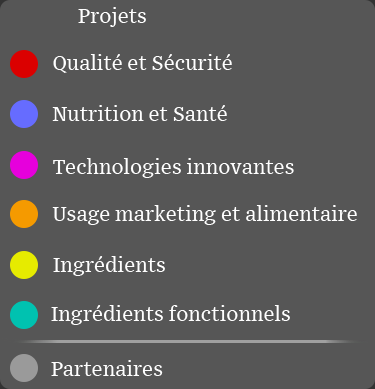
<style>
.page{position:relative;width:375px;height:389px;background:#565656}
.page>*{position:absolute;margin:0}
.t1{font:20px "Font";color:#ffffff}
</style>
<div class="page">
<p class="t1" style="left:78px;top:7px;width:68px;height:20px">Projets</p>
<p class="t1" style="left:53px;top:54px;width:179px;height:19px">Qualité et Sécurité</p>
<p class="t1" style="left:52px;top:105px;width:175px;height:16px">Nutrition et Santé</p>
<p class="t1" style="left:53px;top:158px;width:241px;height:20px">Technologies innovantes</p>
<p class="t1" style="left:52px;top:205px;width:305px;height:20px">Usage marketing et alimentaire</p>
<p class="t1" style="left:53px;top:256px;width:112px;height:20px">Ingrédients</p>
<p class="t1" style="left:51px;top:305px;width:239px;height:20px">Ingrédients fonctionnels</p>
<p class="t1" style="left:51px;top:360px;width:112px;height:16px">Partenaires</p>
</div>
